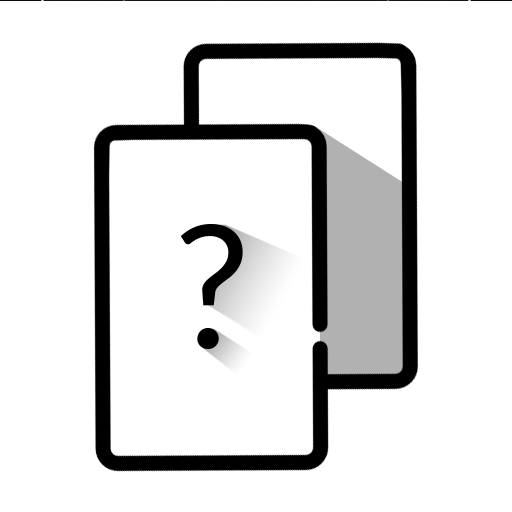
<style>
.page{position:relative;width:512px;height:512px;background:#ffffff}
.page>*{position:absolute;margin:0}
.t1{font:170px "Lato-Regular";letter-spacing:0.055em;color:#000000}
</style>
<div class="page">
<p class="t1" style="left:180px;top:223px;width:63px;height:125px">?</p>
</div>
